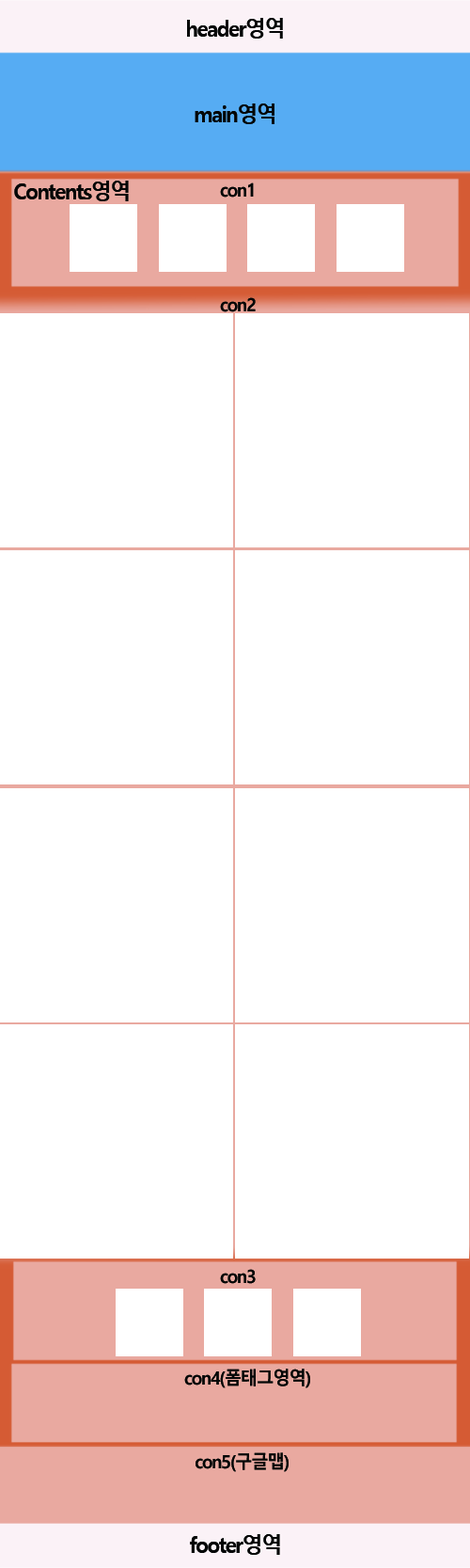
<style>
.page{position:relative;width:470px;height:1568px;background:#ffffff}
.page>*{position:absolute;margin:0}
.t1{font:22px "MalgunGothicBold";letter-spacing:-0.07em;color:#040606;scale:0.95 1}
.t2{font:18.3px "MalgunGothicBold";letter-spacing:-0.07em;color:#040606;scale:0.95 1}
</style>
<div class="page">
<p class="t1" style="left:187px;top:18px;width:96px;height:21px">header영역</p>
<p class="t1" style="left:195px;top:103px;width:80px;height:21px">main영역</p>
<p class="t1" style="left:14px;top:181px;width:115px;height:20px">Contents영역</p>
<p class="t2" style="left:220px;top:182px;width:34px;height:16px">con1</p>
<p class="t2" style="left:220px;top:297px;width:36px;height:15px">con2</p>
<p class="t2" style="left:220px;top:1269px;width:36px;height:15px">con3</p>
<p class="t2" style="left:184px;top:1369px;width:126px;height:19px">con4(폼태그영역)</p>
<p class="t2" style="left:196px;top:1452px;width:93px;height:20px">con5(구글맵)</p>
<p class="t1" style="left:190px;top:1534px;width:90px;height:21px">footer영역</p>
</div>
